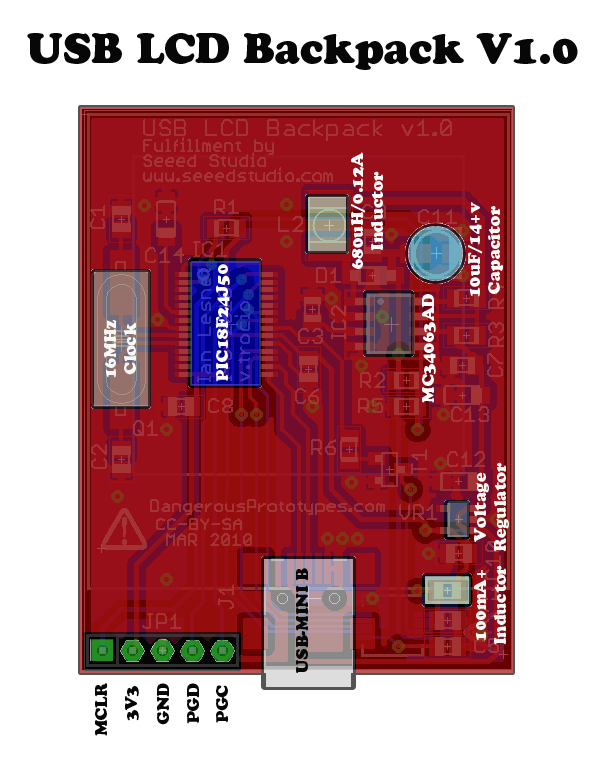
<style>
.page{position:relative;width:611px;height:762px;background:#ffffff}
.page>*{position:absolute;margin:0}
.t1{font:41.7px "CooperBlackStd";color:#070707}
.t2{font:16.7px "CooperBlackStd";color:#fafbfa}
.t3{font:16.7px "CooperBlackStd";color:#fbfdfb}
.t4{font:16.7px "CooperBlackStd";color:#fcfefc}
.t5{font:16.7px "CooperBlackStd";color:#fcfdfc}
.t6{font:16.7px "CooperBlackStd";color:#f6f9f5}
.t7{font:16.7px "CooperBlackStd";color:#f4faf3}
.t8{font:16.7px "CooperBlackStd";color:#070707}
.t9{font:16.7px "CooperBlackStd";color:#f3f9f2}
</style>
<div class="page">
<p class="t1" style="left:27px;top:33px;width:551px;height:37px">USB LCD Backpack V1.0</p>
<p class="t2" style="left:350px;top:152px;width:33px;height:117px;text-align:center;rotate:-90deg">680uH/0.12A<br>Inductor</p>
<p class="t3" style="left:468px;top:202px;width:35px;height:95px;text-align:center;rotate:-90deg">10uF/14+v<br>Capacitor</p>
<p class="t4" style="left:216px;top:264px;width:14px;height:118px;rotate:-90deg">PIC18F24J50</p>
<p class="t5" style="left:421px;top:294px;width:15px;height:109px;rotate:-90deg">MC34063AD</p>
<p class="t6" style="left:104px;top:320px;width:32px;height:58px;text-align:center;rotate:-90deg">16MHz<br>Clock</p>
<p class="t7" style="left:474px;top:462px;width:35px;height:90px;text-align:center;rotate:-90deg">Voltage<br>Regulator</p>
<p class="t8" style="left:296px;top:568px;width:12px;height:105px;rotate:-90deg">USB-MINI B</p>
<p class="t9" style="left:473px;top:565px;width:33px;height:80px;text-align:center;rotate:-90deg">100mA+<br>Inductor</p>
<p class="t8" style="left:95px;top:683px;width:13px;height:53px;rotate:-90deg">MCLR</p>
<p class="t8" style="left:125px;top:686px;width:14px;height:35px;rotate:-90deg">3V3</p>
<p class="t8" style="left:157px;top:683px;width:12px;height:42px;rotate:-90deg">GND</p>
<p class="t8" style="left:187px;top:683px;width:12px;height:41px;rotate:-90deg">PGD</p>
<p class="t8" style="left:216px;top:685px;width:12px;height:38px;rotate:-90deg">PGC</p>
</div>
